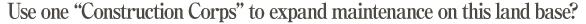
<style>
.page{position:relative;width:586px;height:24px;background:#ffffff}
.page>*{position:absolute;margin:0}
.t1{font:22px "RyuminPro-ExBold";letter-spacing:-0.08em;color:#4c4843;scale:0.9 1}
</style>
<div class="page">
<p class="t1" style="left:7px;top:2px;width:571px;height:21px">Use one “Construction Corps” to expand maintenance on this land base?</p>
</div>
